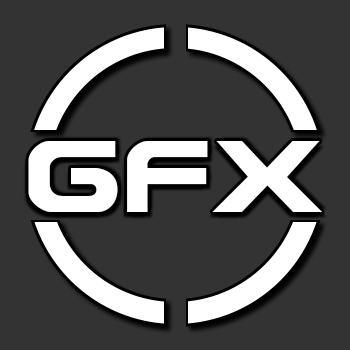
<style>
.page{position:relative;width:350px;height:350px;background:#333333}
.page>*{position:absolute;margin:0}
.t1{font:102px "EarthNormal";color:#ffffff}
</style>
<div class="page">
<p class="t1" style="left:28px;top:141px;width:294px;height:71px">GFX</p>
</div>
